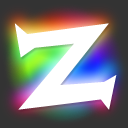
<style>
.page{position:relative;width:128px;height:128px;background:#ffffff}
.page>*{position:absolute;margin:0}
.t1{font:164.8px "FantiqueFour";color:#ffffff;scale:1.12 1}
</style>
<div class="page">
<p class="t1" style="left:14px;top:23px;width:103px;height:87px">z</p>
</div>
